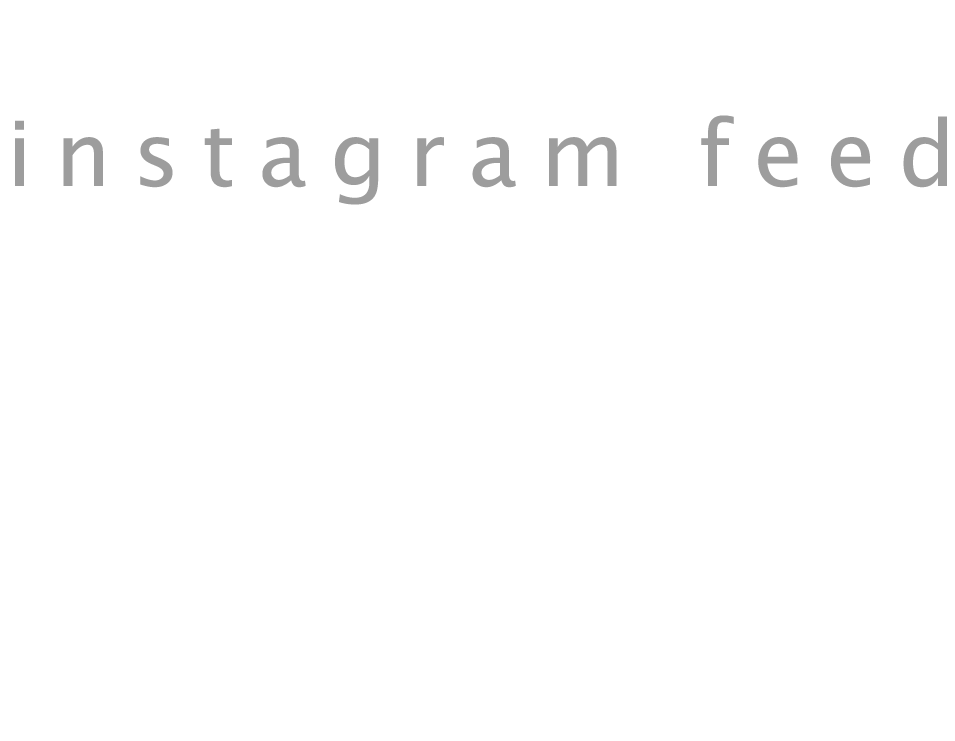
<style>
.page{position:relative;width:955px;height:741px;background:#ffffff}
.page>*{position:absolute;margin:0}
.t1{font:90px "LucidaGrande";letter-spacing:0.25em;color:#9d9d9d}
</style>
<div class="page">
<p class="t1" style="left:15px;top:115px;width:932px;height:90px">instagram feed</p>
</div>
